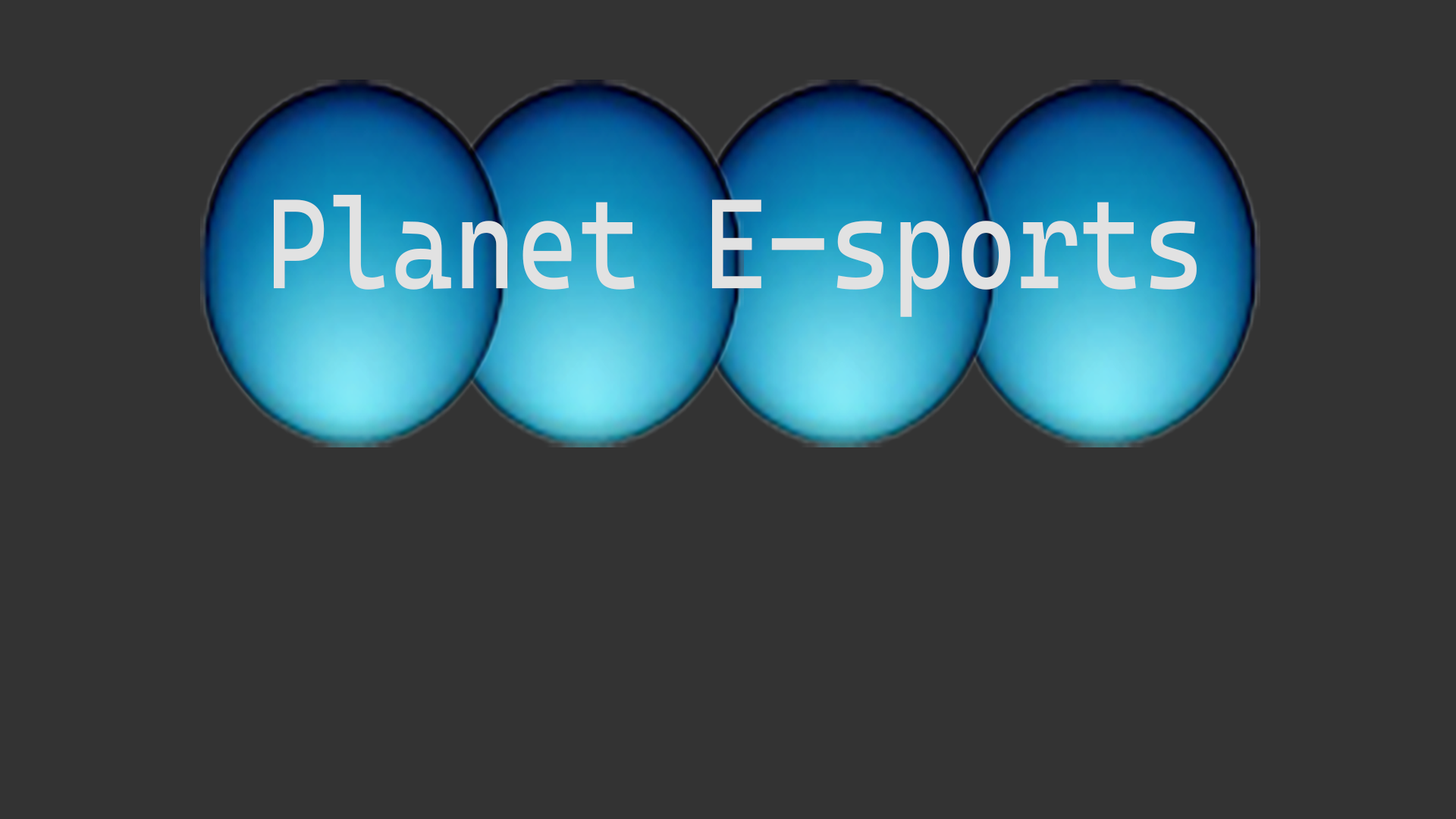
<style>
.page{position:relative;width:1456px;height:819px;background:#333333}
.page>*{position:absolute;margin:0}
.t1{font:127.6px "CascadiaMono-Regular";color:#e2e2e2;scale:0.84 1}
</style>
<div class="page">
<p class="t1" style="left:274px;top:194px;width:923px;height:123px">Planet E-sports</p>
</div>
